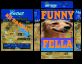
<style>
.page{position:relative;width:82px;height:64px;background:#000000}
.page>*{position:absolute;margin:0}
.t1{font:6px "Cortez-Regular";color:#ff8400}
.t2{font:12px "Cortez-Regular";color:#ff8400}
</style>
<div class="page">
<p class="t1" style="left:5px;top:13px;width:25px;height:19px;rotate:34deg">all natural</p>
<p class="t2" style="left:41px;top:11px;width:34px;height:37px;text-align:center">FUNNY<br><br>FELLA</p>
</div>
